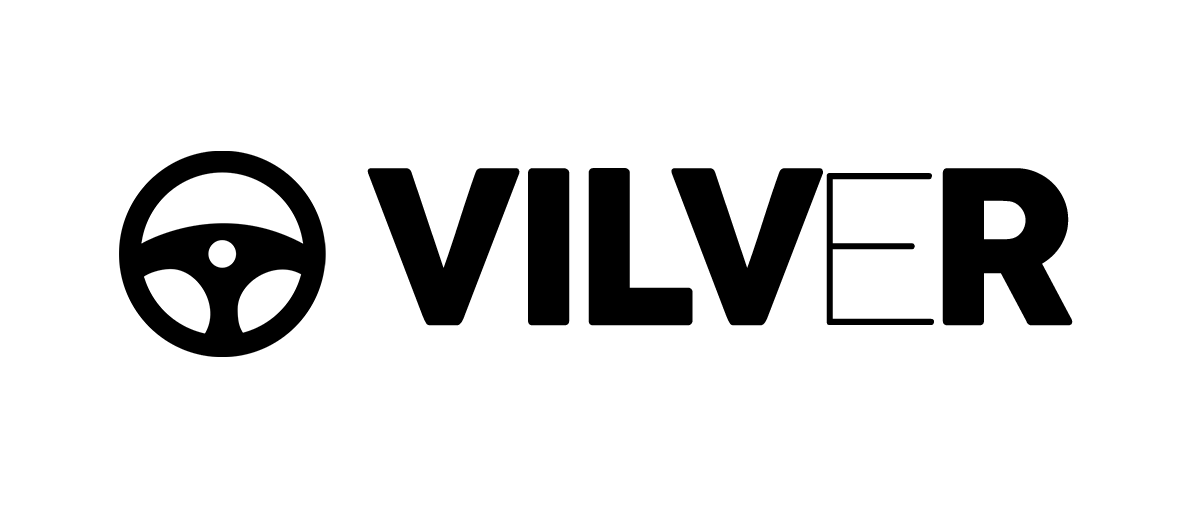
<style>
.page{position:relative;width:1200px;height:512px;background:#ffffff}
.page>*{position:absolute;margin:0}
.t1{font:211.3px "Cocogoose";letter-spacing:-0.05em;color:#000000}
.t2{font:204.2px "CocogoosePro-Thin";letter-spacing:0.05em;color:#000000}
</style>
<div class="page">
<p class="t1" style="left:367px;top:168px;width:706px;height:158px">VILV  R</p>
<p class="t2" style="left:826px;top:173px;width:108px;height:152px">E</p>
</div>
